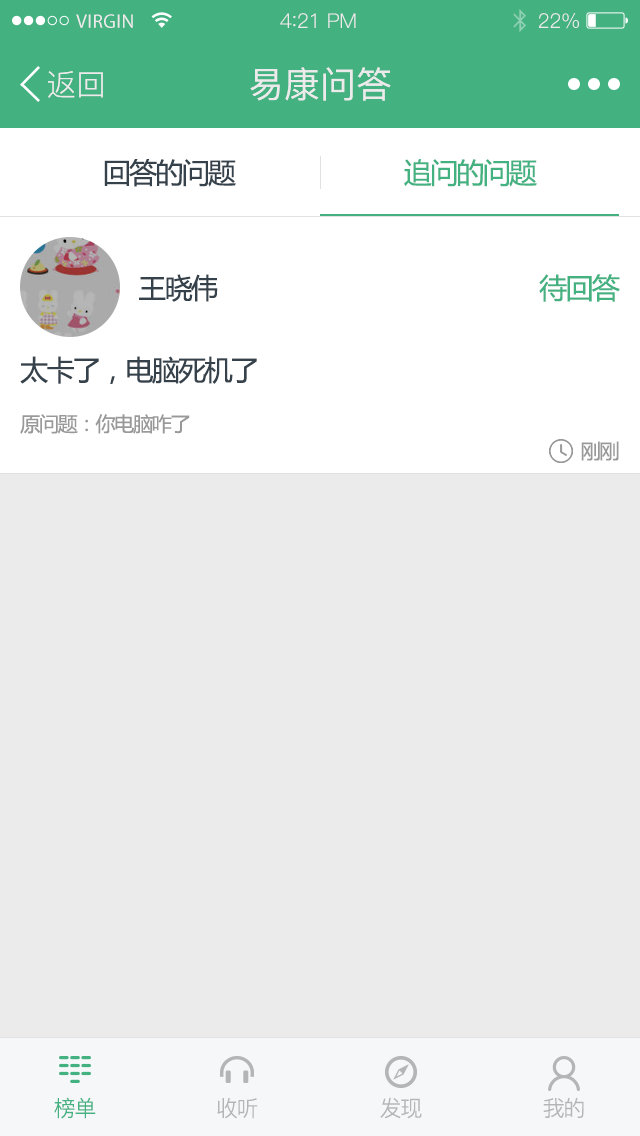
<style>
.page{position:relative;width:640px;height:1136px;background:#ebebeb}
.page>*{position:absolute;margin:0}
.t1{font:19.6px "MyriadPro-Regular";letter-spacing:0.02em;color:#ebebeb}
.t2{font:20.4px "PingFang-SC-Regular";letter-spacing:-0.02em;color:#ebebeb}
.t3{font:22.1px "PingFang-SC-Regular";letter-spacing:-0.02em;color:#ebebeb}
.t4{font:30px "PingFang-SC-Regular";color:#ebebeb}
.t5{font:36px "PingFang-SC-Medium";color:#ebebeb}
.t6{font:28px "MicrosoftYaHei";letter-spacing:-0.06em;color:#35424b}
.t7{font:28px "MicrosoftYaHei";letter-spacing:-0.06em;color:#44b181}
.t8{font:20px "MicrosoftYaHei";letter-spacing:-0.06em;color:#999999}
.t9{font:22px "PingFang-SC-Regular";letter-spacing:-0.06em;color:#44b181}
.t10{font:22px "PingFang-SC-Regular";letter-spacing:-0.06em;color:#b4b5b6}
</style>
<div class="page">
<p class="t1" style="left:76px;top:14px;width:57px;height:14px">VIRGIN</p>
<p class="t2" style="left:280px;top:13px;width:76px;height:15px">4<span class="t3">:</span>21 PM</p>
<p class="t2" style="left:539px;top:13px;width:40px;height:16px">22%</p>
<p class="t4" style="left:48px;top:71px;width:55px;height:27px">返回</p>
<p class="t5" style="left:250px;top:67px;width:141px;height:34px">易康问答</p>
<p class="t6" style="left:104px;top:159px;width:132px;height:28px">回答的问题</p>
<p class="t7" style="left:404px;top:159px;width:133px;height:28px">追问的问题</p>
<p class="t6" style="left:139px;top:274px;width:79px;height:28px">王晓伟</p>
<p class="t7" style="left:539px;top:274px;width:81px;height:28px">待回答</p>
<p class="t6" style="left:20px;top:356px;width:237px;height:28px">太卡了，电脑死机了</p>
<p class="t8" style="left:20px;top:414px;width:170px;height:20px">原问题：你电脑咋了</p>
<p class="t8" style="left:581px;top:441px;width:38px;height:20px">刚刚</p>
<p class="t9" style="left:54px;top:1097px;width:42px;height:22px">榜单</p>
<p class="t10" style="left:380px;top:1097px;width:42px;height:22px">发现</p>
<p class="t10" style="left:543px;top:1097px;width:41px;height:21px">我的</p>
<p class="t10" style="left:217px;top:1098px;width:41px;height:21px">收听</p>
</div>
